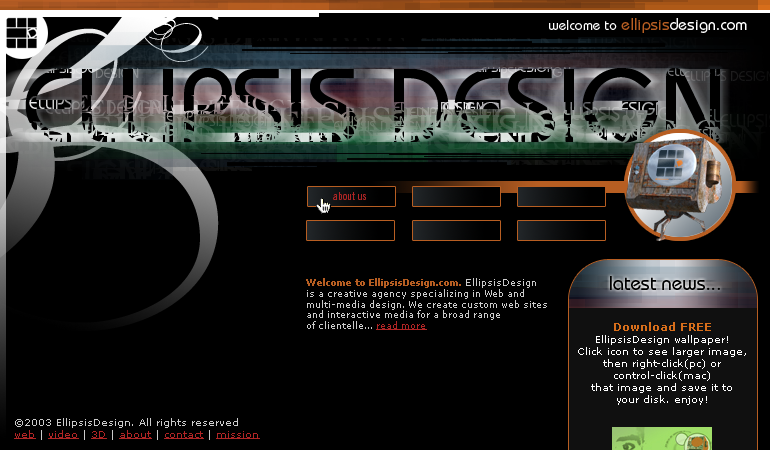
<style>
.page{position:relative;width:770px;height:450px;background:#000000}
.page>*{position:absolute;margin:0}
.t1{font:14px "Bauhaus-Medium";color:#ffffff}
.t2{font:16px "Bauhaus-Medium";color:#b75e22}
.t3{font:16px "Bauhaus-Medium";color:#ffffff}
.t4{font:11px "TradeGothic-CondEighteen";color:#b12525}
.t5{font:9px "Verdana";color:#cbcbcb}
.t6{font:9px "Verdana-Bold";color:#b75e22}
.t7{font:9px "Verdana";color:#b12525;text-decoration:underline}
.t8{font:19.6px "Bauhaus-Medium";color:#000000}
.t9{font:10px "Verdana";color:#cbcbcb}
.t10{font:10px "Verdana";color:#b12525;text-decoration:underline}
</style>
<div class="page">
<p class="t1" style="left:549px;top:18px;width:198px;height:15px">welcome to <span class="t2">ellipsis</span><span class="t3">design.com</span></p>
<p class="t4" style="left:333px;top:192px;width:33px;height:8px">about us</p>
<p class="t5" style="left:306px;top:278px;width:241px;height:52px"><span class="t6">Welcome to EllipsisDesign.com. </span>EllipsisDesign<br>is a creative agency specializing in Web and<br>multi-media design. We create custom web sites<br>and interactive media for a broad range<br>of clientelle... <span class="t7">read more</span></p>
<p class="t8" style="left:610px;top:276px;width:110px;height:14px">latest news...</p>
<p class="t9" style="left:14px;top:418px;width:246px;height:22px">©2003 EllipsisDesign. All rights reserved<br><span class="t10">web</span> | <span class="t10">video</span> | <span class="t10">3D</span> | <span class="t10">about</span> | <span class="t10">contact</span> | <span class="t10">mission</span></p>
</div>
